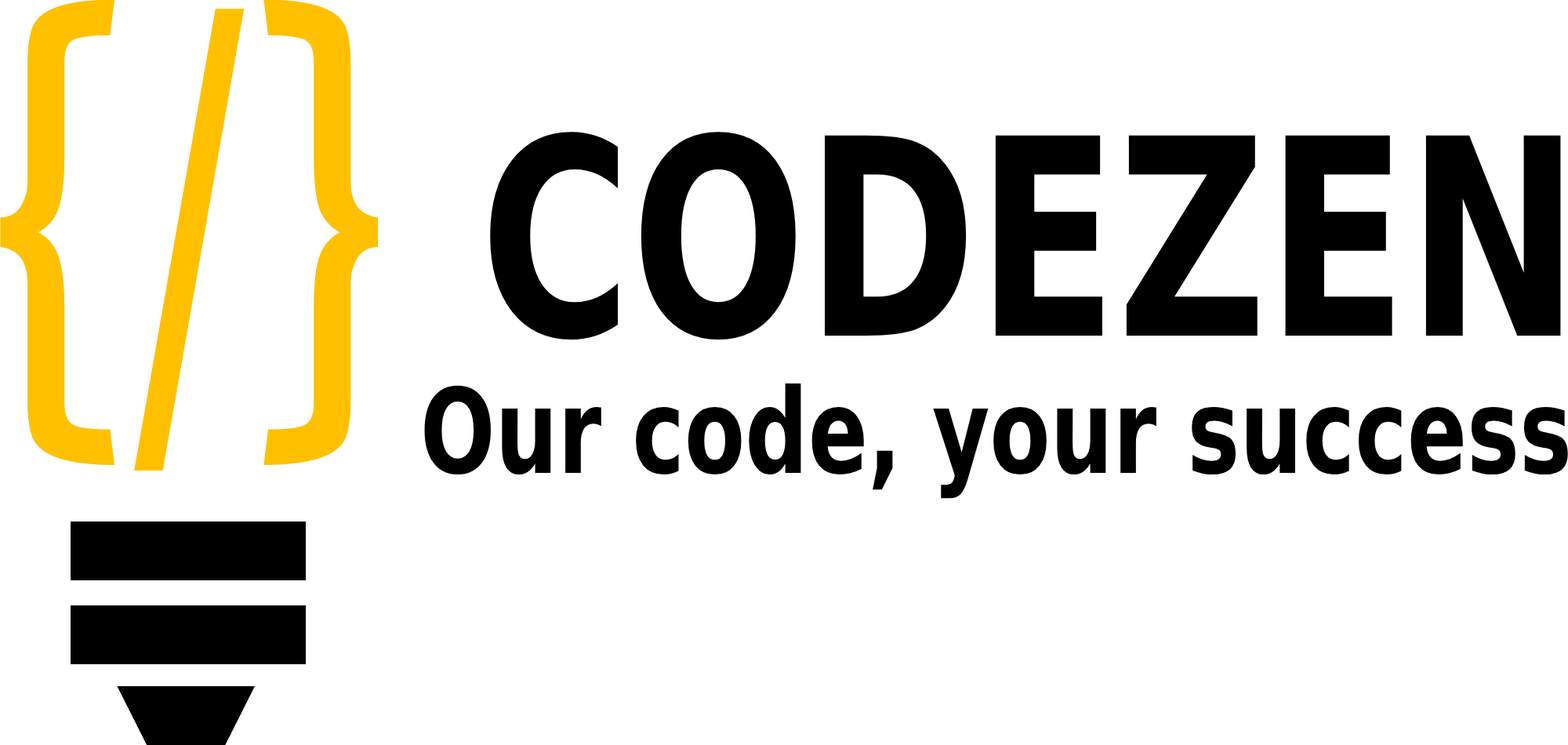
<style>
.page{position:relative;width:1568px;height:745px;background:#ffffff}
.page>*{position:absolute;margin:0}
.t1{font:548.8px "AverageSans-Regular";color:#ffc000;scale:0.8 1}
.t2{font:274.4px "BitstreamVeraSans-Bold";color:#000000;scale:0.75 1}
.t3{font:117.6px "BitstreamVeraSans-Bold";color:#000000;scale:0.75 1}
</style>
<div class="page">
<p class="t1" style="left:0px;top:0px;width:379px;height:470px">{/}</p>
<p class="t2" style="left:490px;top:132px;width:1071px;height:207px">CODEZEN</p>
<p class="t3" style="left:424px;top:383px;width:1144px;height:116px">Our code, your success</p>
</div>
